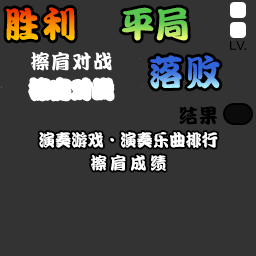
<style>
.page{position:relative;width:256px;height:256px;background:#333333}
.page>*{position:absolute;margin:0}
.t1{font:36px "DFPKanTingLiuW9";letter-spacing:0.09em;scale:0.96 1}
.t2{font:36px "DFPKanTingLiuW9";scale:0.96 1}
.t3{font:20px "DFPKanTingLiuW9";letter-spacing:0.09em;color:#ffffff;scale:0.96 1}
.t4{font:20px "DFPKanTingLiuW9";letter-spacing:0.05em;color:#000000;scale:0.96 1}
.t5{font:17px "DFPKanTingLiuW9";color:#ffffff;scale:0.96 1}
.t6{font:17px "DFPKanTingLiuW9";letter-spacing:0.22em;color:#ffffff;scale:0.96 1}
</style>
<div class="page">
<p class="t1" style="left:6px;top:7px;width:69px;height:34px">胜利</p>
<p class="t2" style="left:122px;top:7px;width:66px;height:34px">平局</p>
<p class="t3" style="left:31px;top:52px;width:81px;height:19px">擦肩对战</p>
<p class="t1" style="left:150px;top:55px;width:70px;height:34px">落败</p>
<p class="t4" style="left:179px;top:106px;width:38px;height:19px">结果</p>
<p class="t5" style="left:39px;top:132px;width:179px;height:16px">演奏游戏·演奏乐曲排行</p>
<p class="t6" style="left:91px;top:155px;width:75px;height:16px">擦肩成绩</p>
</div>
